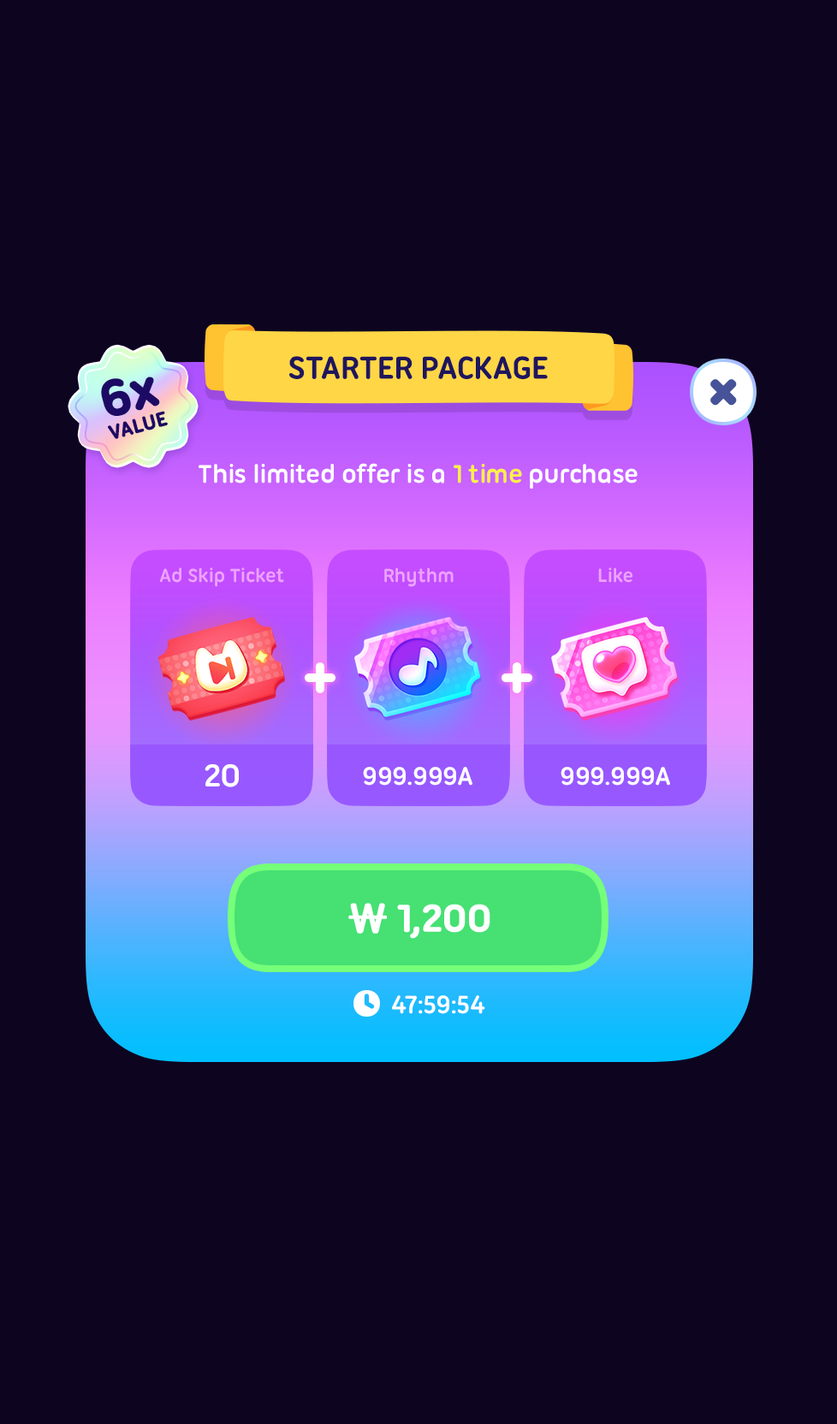
<style>
.page{position:relative;width:837px;height:1424px;background:#0d0420}
.page>*{position:absolute;margin:0}
.t1{font:34.2px "UbuntuTitling-Bold";letter-spacing:-0.025em;color:#1f165d;text-transform:uppercase}
.t2{font:54.4px "UbuntuTitling-Bold";letter-spacing:-0.025em;color:#1d0a64;font-weight:bold}
.t3{font:21.4px "UbuntuTitling-Bold";letter-spacing:-0.025em;color:#1d0a64;text-transform:uppercase;font-weight:bold}
.t4{font:27.4px "UbuntuTitling-Bold";letter-spacing:-0.025em;color:#ffffff}
.t5{font:27.4px "UbuntuTitling-Bold";letter-spacing:-0.025em;color:#fff045}
.t6{font:20.5px "UbuntuTitling-Bold";letter-spacing:-0.025em;color:#eda2ff}
.t7{font:34.2px "UbuntuTitling-Bold";letter-spacing:-0.025em;color:#ffffff}
.t8{font:41.1px "UbuntuTitling-Bold";letter-spacing:-0.04em;color:#ffffff;text-transform:uppercase;font-weight:bold}
.t9{font:41.1px "NanumSquareRoundOTFEB";letter-spacing:-0.04em;color:#ffffff;text-transform:uppercase;font-weight:bold}
.t10{font:27.2px "UbuntuTitling-Bold";letter-spacing:-0.025em;color:#ffffff;text-transform:uppercase}
</style>
<div class="page">
<p class="t1" style="left:289px;top:356px;width:259px;height:23px">Starter Package</p>
<p class="t2" style="left:101px;top:377px;width:59px;height:39px;rotate:-15deg">6x</p>
<p class="t3" style="left:108px;top:411px;width:60px;height:28px;rotate:-15deg">Value</p>
<p class="t4" style="left:199px;top:463px;width:439px;height:26px">This limited offer is a <span class="t5">1 time</span> purchase</p>
<p class="t6" style="left:159px;top:568px;width:125px;height:19px">Ad Skip Ticket</p>
<p class="t6" style="left:384px;top:568px;width:70px;height:19px">Rhythm</p>
<p class="t6" style="left:598px;top:568px;width:35px;height:15px">Like</p>
<p class="t7" style="left:205px;top:764px;width:34px;height:24px">20</p>
<p class="t4" style="left:363px;top:767px;width:110px;height:19px">999.999A</p>
<p class="t4" style="left:561px;top:767px;width:109px;height:19px">999.999A</p>
<p class="t8" style="left:348px;top:903px;width:142px;height:36px"><span class="t9">₩ </span>1,200</p>
<p class="t10" style="left:392px;top:996px;width:93px;height:18px">47:59:54</p>
</div>
